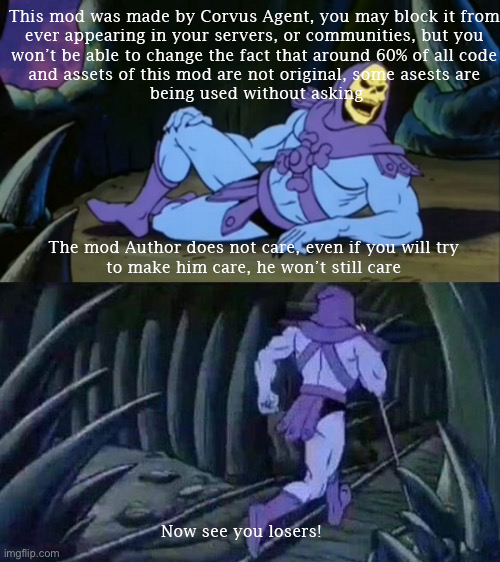
<style>
.page{position:relative;width:500px;height:562px}
.page>*{position:absolute;margin:0}
.t1{font:16px "LucidaFax";color:#ffffff}
</style>
<div class="page">
<p class="t1" style="left:9px;top:10px;width:491px;height:92px;text-align:center">This mod was made by Corvus Agent, you may block it from <br>ever appearing in your servers, or communities, but you <br>won’t be able to change the fact that around 60% of all code <br>and assets of this mod are not original, some asests are <br>being used without asking</p>
<p class="t1" style="left:48px;top:241px;width:411px;height:34px;text-align:center">The mod Author does not care, even if you will try<br>to make him care, he won’t still care</p>
<p class="t1" style="left:161px;top:525px;width:160px;height:15px">Now see you losers!</p>
</div>
